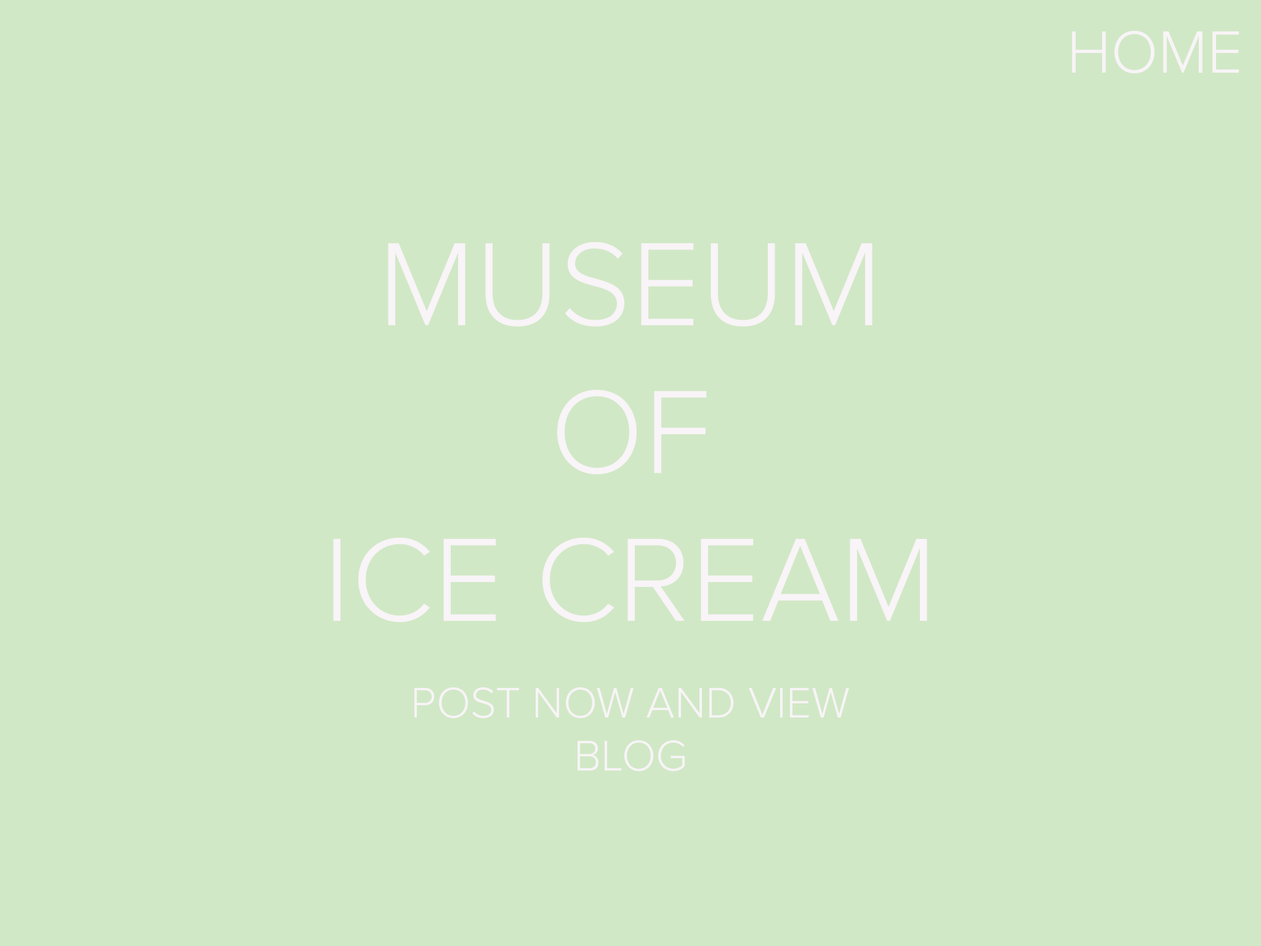
<style>
.page{position:relative;width:1261px;height:946px;background:#d1e8c6}
.page>*{position:absolute;margin:0}
.t1{font:62.2px "ProximaNova-Light";color:#f8f4f7}
.t2{font:123.1px "ProximaNova-Light";color:#f8f4f7}
.t3{font:44.3px "ProximaNova-Light";color:#f8f4f7}
</style>
<div class="page">
<p class="t1" style="left:1072px;top:31px;width:167px;height:42px">HOME</p>
<p class="t2" style="left:333px;top:241px;width:594px;height:381px;text-align:center">MUSEUM <br>OF <br>ICE CREAM <br>BLOG</p>
<p class="t3" style="left:414px;top:687px;width:435px;height:84px;text-align:center">POST NOW AND VIEW BLOG</p>
</div>
